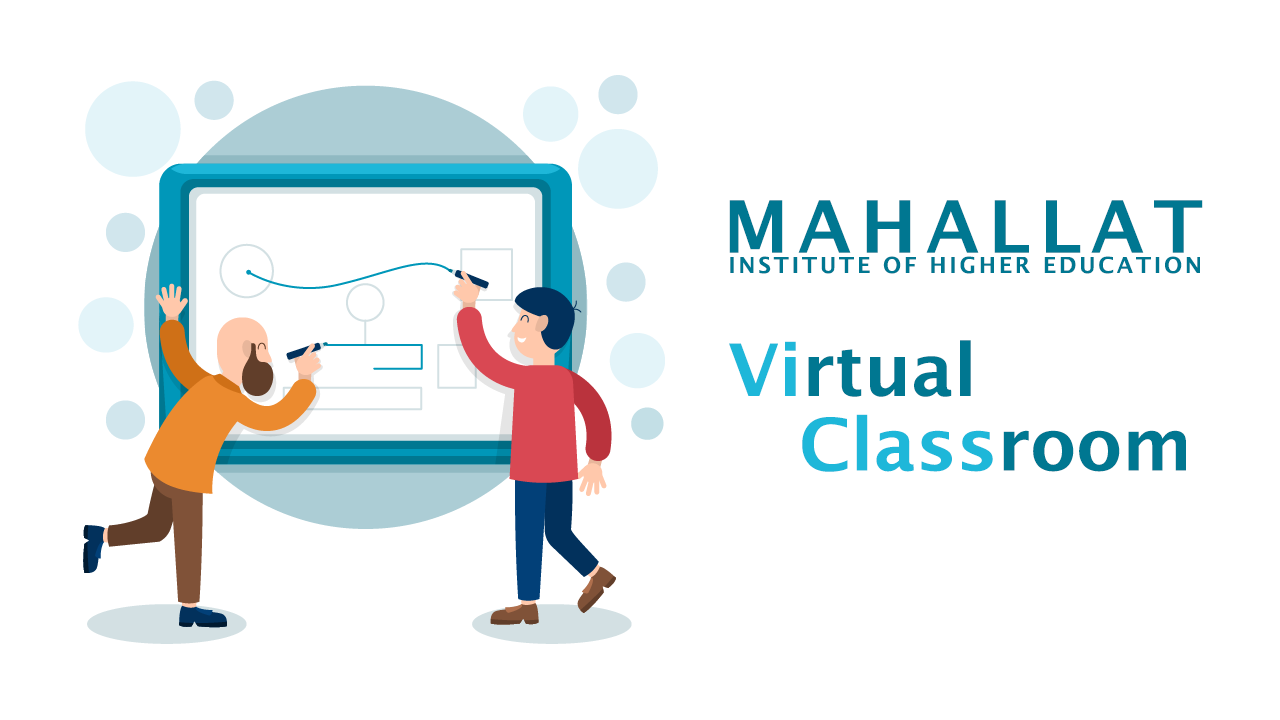
<style>
.page{position:relative;width:1280px;height:720px;background:#ffffff}
.page>*{position:absolute;margin:0}
.t1{font:72px "LucidaSans-Demi";letter-spacing:0.15em;color:#007791}
.t2{font:22px "LucidaSans-Demi";letter-spacing:0.13em;color:#007791}
.t3{font:72px "LucidaSans-Demi";color:#007791}
.t4{font:72px "LucidaSans-Demi";color:#1eb7d9}
</style>
<div class="page">
<p class="t1" style="left:729px;top:200px;width:474px;height:53px">MAHALLAT</p>
<p class="t2" style="left:730px;top:256px;width:470px;height:18px">INSTITUTE OF HIGHER EDUCATION</p>
<p class="t3" style="left:729px;top:340px;width:242px;height:57px"><span class="t4">Vi</span>rtual</p>
<p class="t4" style="left:802px;top:414px;width:384px;height:58px">Class<span class="t3">room</span></p>
</div>
